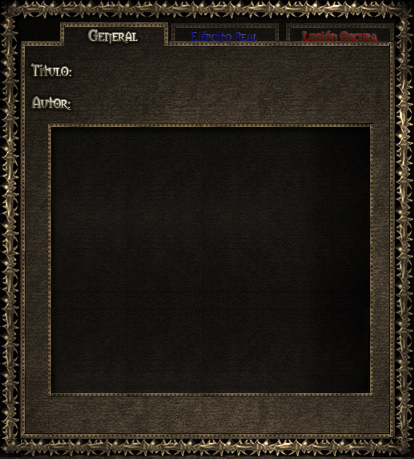
<style>
.page{position:relative;width:414px;height:459px}
.page>*{position:absolute;margin:0}
.t1{font:14px "Morpheus"}
</style>
<div class="page">
<p class="t1" style="left:88px;top:30px;width:50px;height:14px">General</p>
<p class="t1" style="left:31px;top:64px;width:41px;height:12px">Titulo:</p>
<p class="t1" style="left:31px;top:97px;width:40px;height:13px">Autor:</p>
</div>
